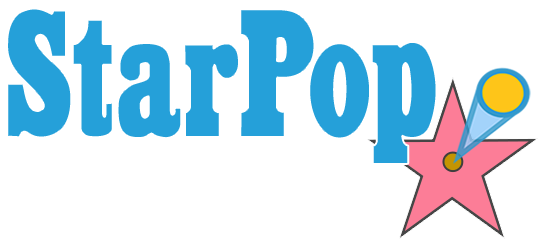
<style>
.page{position:relative;width:538px;height:250px;background:#ffffff}
.page>*{position:absolute;margin:0}
.t1{font:139.8px "Cairo";letter-spacing:-0.01em;color:#25a0d9;font-weight:bold;scale:0.83 1}
.t2{font:139.8px "Cairo";letter-spacing:-0.05em;color:#25a0d9;font-weight:bold;scale:0.83 1}
.t3{font:139.8px "Cairo";letter-spacing:-0.025em;color:#25a0d9;font-weight:bold;scale:0.83 1}
.t4{font:139.8px "Cairo";letter-spacing:-0.1em;color:#25a0d9;font-weight:bold;scale:0.83 1}
.t5{font:139.8px "Cairo";color:#25a0d9;font-weight:bold;scale:0.83 1}
</style>
<div class="page">
<p class="t1" style="left:7px;top:8px;width:430px;height:156px"><span class="t2">S</span>ta<span class="t3">r</span><span class="t4">P</span><span class="t3">o</span><span class="t5">p</span></p>
</div>
